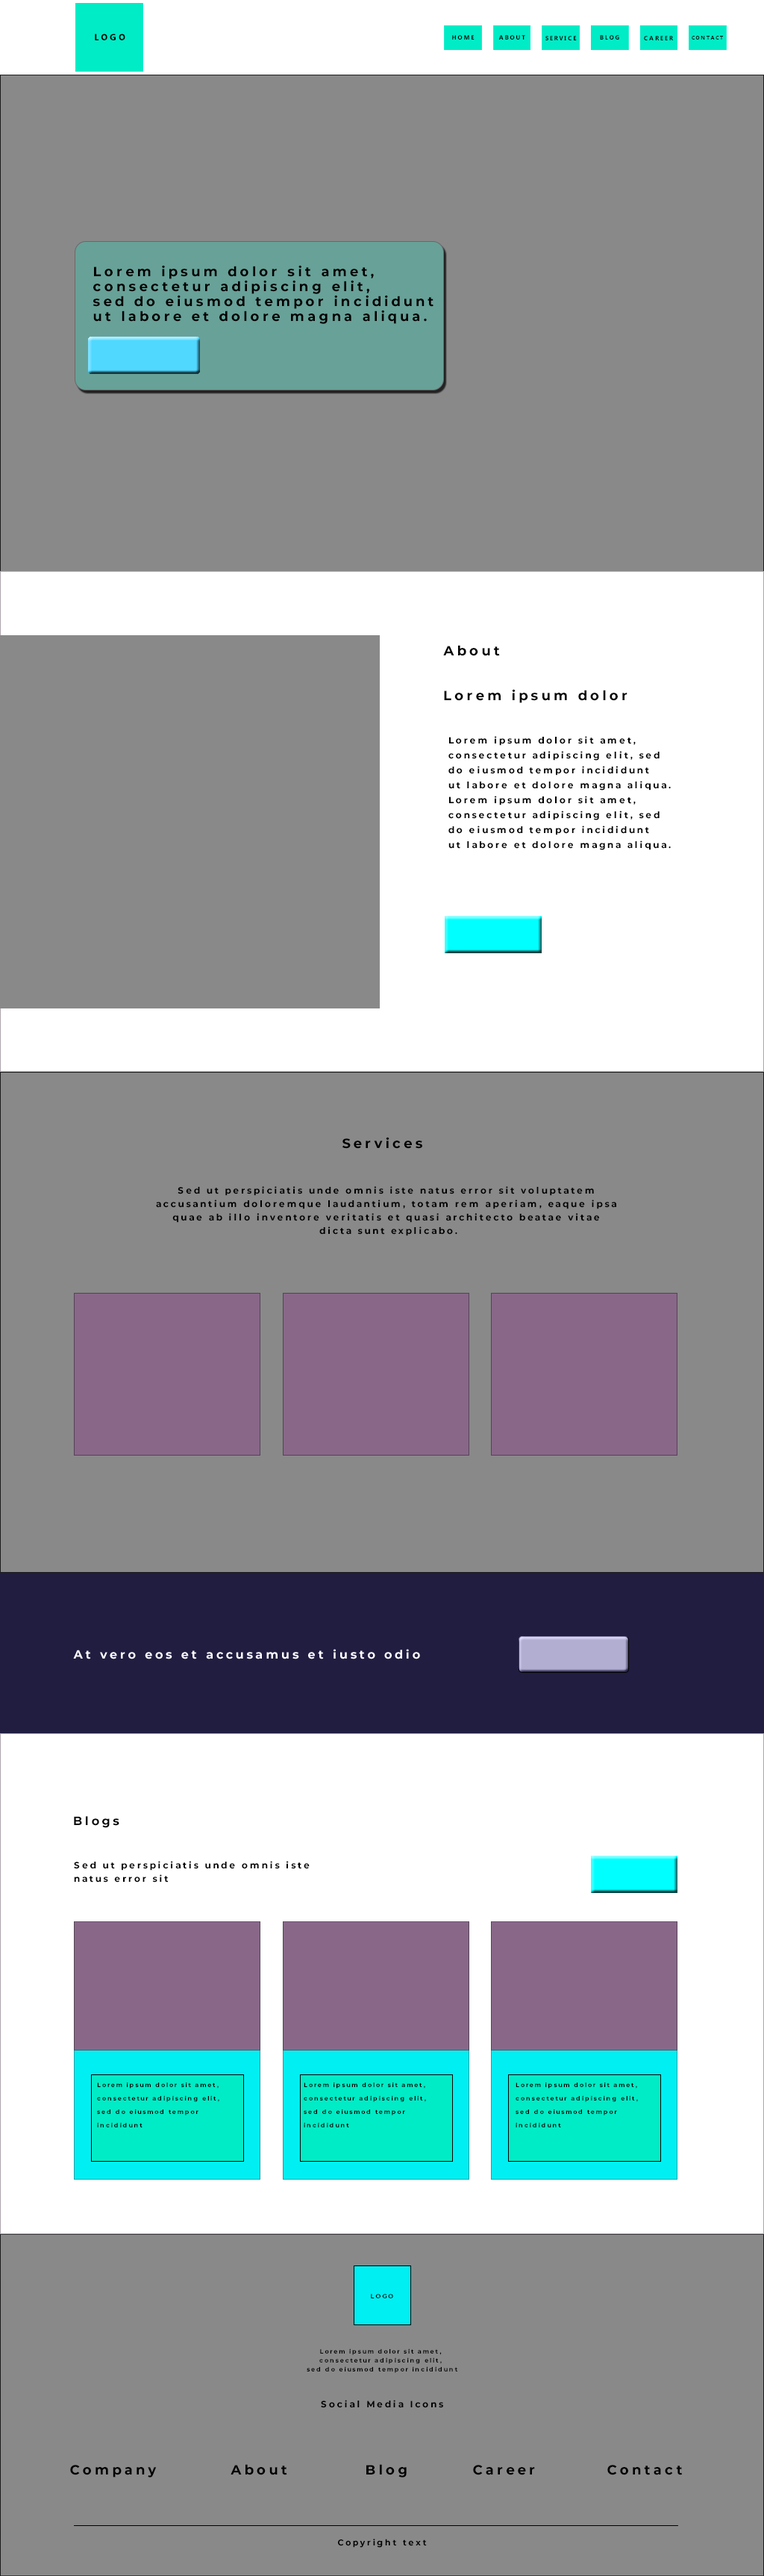
<style>
.page{position:relative;width:764px;height:2576px;background:#898989}
.page>*{position:absolute;margin:0}
.t1{font:9px "MicrosoftNewTaiLue-Bold";letter-spacing:0.24em;color:#000000}
.t2{font:6px "MicrosoftNewTaiLue-Bold";letter-spacing:0.24em;color:#000000}
.t3{font:5.2px "MicrosoftNewTaiLue-Bold";letter-spacing:0.24em;color:#000000}
.t4{font:13.4px/7.5px "Montserrat-Bold";letter-spacing:0.24em;color:#000000}
.t5{font:13.4px "Montserrat-Bold";letter-spacing:0.24em;color:#000000}
.t6{font:9px/7.5px "Montserrat-Bold";letter-spacing:0.24em;color:#000000}
.t7{font:9px/13.4px "Montserrat-Bold";letter-spacing:0.24em;color:#000000}
.t8{font:11.9px "Montserrat-Bold";letter-spacing:0.24em;color:#ffffff}
.t9{font:11.9px "Montserrat-Bold";letter-spacing:0.24em;color:#000000}
.t10{font:6px/13.4px "Montserrat-Bold";letter-spacing:0.24em;color:#000000}
.t11{font:6px "Montserrat-Bold";letter-spacing:0.24em;color:#000000}
.t12{font:6px/9px "Montserrat-Bold";letter-spacing:0.24em;color:#000000}
.t13{font:9px "Montserrat-Bold";letter-spacing:0.24em;color:#000000}
.t14{font:8.2px "Montserrat-Bold";letter-spacing:0.24em;color:#000000}
</style>
<div class="page">
<p class="t1" style="left:95px;top:34px;width:30px;height:6px">LOGO</p>
<p class="t2" style="left:452px;top:35px;width:23px;height:5px">HOME</p>
<p class="t2" style="left:499px;top:35px;width:27px;height:5px">ABOUT</p>
<p class="t2" style="left:546px;top:36px;width:31px;height:4px">SERVICE</p>
<p class="t2" style="left:600px;top:35px;width:20px;height:5px">BLOG</p>
<p class="t2" style="left:644px;top:36px;width:29px;height:4px">CAREER</p>
<p class="t3" style="left:692px;top:36px;width:31px;height:4px">CONTACT</p>
<p class="t4" style="left:93px;top:265px;width:341px;height:59px">Lorem ipsum dolor sit amet, <br><br>consectetur adipiscing elit, <br><br>sed do eiusmod tempor incididunt <br><br>ut labore et dolore magna aliqua.</p>
<p class="t5" style="left:443px;top:645px;width:57px;height:11px">About</p>
<p class="t5" style="left:444px;top:689px;width:184px;height:14px">Lorem ipsum dolor</p>
<p class="t6" style="left:449px;top:736px;width:222px;height:114px">Lorem ipsum dolor sit amet, <br><br>consectetur adipiscing elit, sed <br><br>do eiusmod tempor incididunt <br><br>ut labore et dolore magna aliqua.<br><br>Lorem ipsum dolor sit amet, <br><br>consectetur adipiscing elit, sed <br><br>do eiusmod tempor incididunt <br><br>ut labore et dolore magna aliqua.</p>
<p class="t5" style="left:343px;top:1137px;width:79px;height:12px">Services</p>
<p class="t7" style="left:156px;top:1186px;width:461px;height:50px;text-align:center">Sed ut perspiciatis unde omnis iste natus error sit voluptatem <br>accusantium doloremque laudantium, totam rem aperiam, eaque ipsa <br>quae ab illo inventore veritatis et quasi architecto beatae vitae <br>dicta sunt explicabo.</p>
<p class="t8" style="left:73px;top:1649px;width:347px;height:10px">At vero eos et accusamus et iusto odio</p>
<p class="t9" style="left:74px;top:1816px;width:45px;height:12px">Blogs</p>
<p class="t7" style="left:74px;top:1861px;width:236px;height:22px">Sed ut perspiciatis unde omnis iste <br>natus error sit</p>
<p class="t10" style="left:97px;top:2082px;width:122px;height:45px">Lorem ipsum dolor sit amet, <br>consectetur adipiscing elit, <br>sed do eiusmod tempor <br>incididunt</p>
<p class="t10" style="left:304px;top:2082px;width:122px;height:45px">Lorem ipsum dolor sit amet, <br>consectetur adipiscing elit, <br>sed do eiusmod tempor <br>incididunt</p>
<p class="t10" style="left:516px;top:2082px;width:122px;height:45px">Lorem ipsum dolor sit amet, <br>consectetur adipiscing elit, <br>sed do eiusmod tempor <br>incididunt</p>
<p class="t11" style="left:371px;top:2294px;width:22px;height:4px">LOGO</p>
<p class="t12" style="left:307px;top:2348px;width:151px;height:25px;text-align:center">Lorem ipsum dolor sit amet, <br>consectetur adipiscing elit, <br>sed do eiusmod tempor incididunt</p>
<p class="t13" style="left:321px;top:2400px;width:122px;height:8px">Social Media Icons</p>
<p class="t5" style="left:70px;top:2464px;width:612px;height:13px">Company   About   Blog   Career   Contact</p>
<p class="t14" style="left:338px;top:2539px;width:89px;height:9px">Copyright text</p>
</div>
